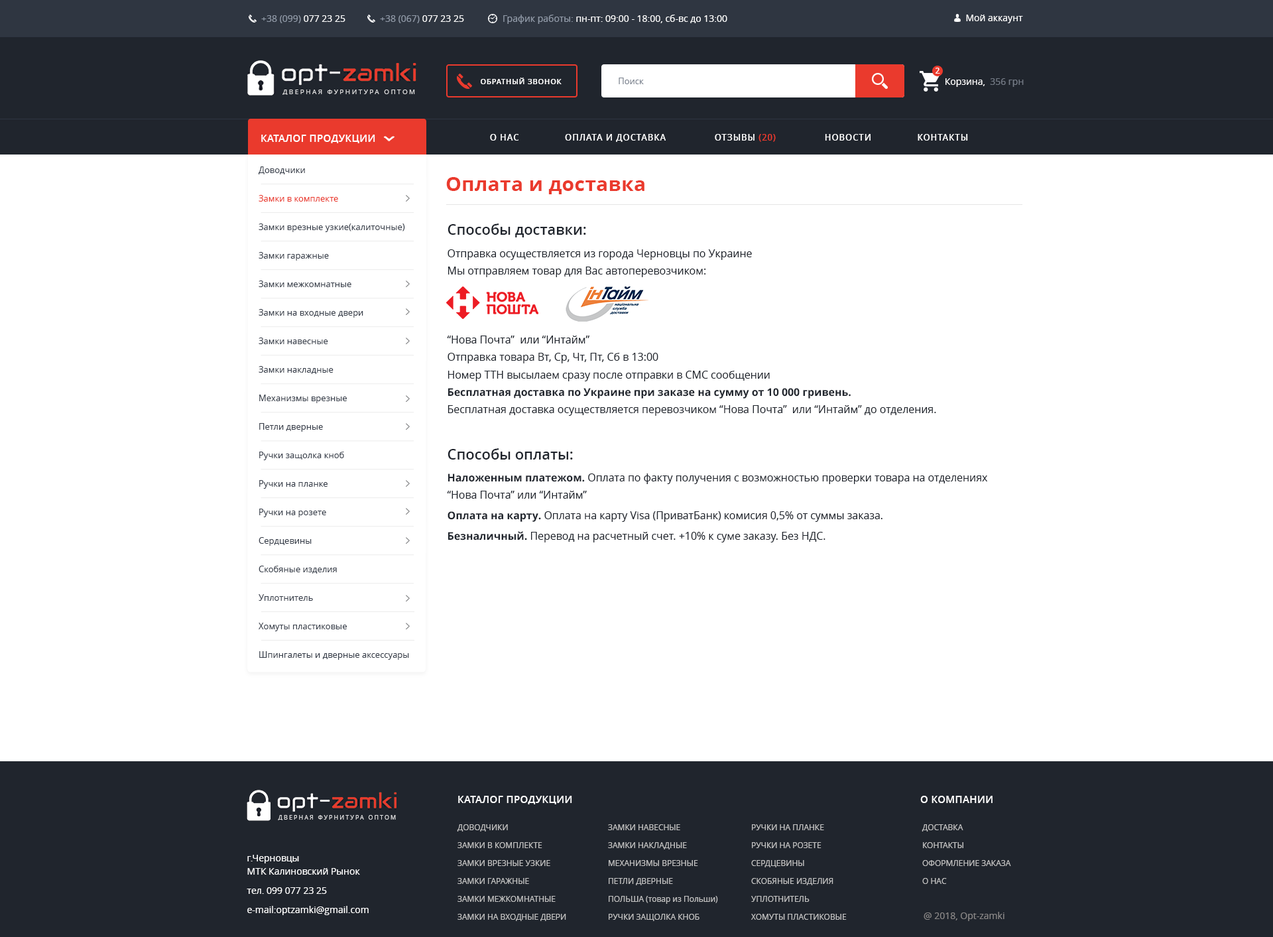
<style>
.page{position:relative;width:1273px;height:937px;background:#ffffff}
.page>*{position:absolute;margin:0}
.t1{font:9.3px "OpenSans";color:#9099a7}
.t2{font:9.3px "OpenSans";color:#ffffff}
.t3{font:7.3px "OpenSans-Semibold";letter-spacing:0.075em;color:#ffffff;text-transform:uppercase}
.t4{font:8.6px "OpenSans";color:#79818d}
.t5{font:8px "OpenSans-Semibold";color:#ffffff}
.t6{font:6.6px "OpenSans";letter-spacing:0.26em;color:#dfdfe0;text-transform:uppercase}
.t7{font:9.3px "OpenSans";color:#747b86}
.t8{font:9.9px "OpenSans-Semibold";letter-spacing:0.025em;color:#ffffff;text-transform:uppercase}
.t9{font:8.6px "OpenSans-Semibold";letter-spacing:0.07em;color:#ffffff;text-transform:uppercase}
.t10{font:8.6px "OpenSans-Semibold";letter-spacing:0.07em;color:#ea3a2d;text-transform:uppercase}
.t11{font:8.6px/28.5px "OpenSans";color:#373e4a}
.t12{font:8.6px/28.5px "OpenSans";color:#ea3a2d}
.t13{font:19.9px "OpenSans-Bold";letter-spacing:0.01em;color:#ea3a2d}
.t14{font:14.6px "OpenSans-Semibold";color:#20252d}
.t15{font:10.6px/17.3px "OpenSans";color:#20252d}
.t16{font:10.6px/17.3px "OpenSans-Bold";color:#20252d}
.t17{font:10.6px/20.6px "OpenSans-Bold";color:#20252d}
.t18{font:10.6px/20.6px "OpenSans";color:#20252d}
.t19{font:5.8px "OpenSans";letter-spacing:0.26em;color:#dfdfe0;text-transform:uppercase}
.t20{font:8px/17.9px "OpenSans";color:#c2c2c2}
.t21{font:8px/17.9px "OpenSans";color:#c2c2c2;text-transform:uppercase}
.t22{font:9.3px/19.2px "OpenSans";color:#ffffff}
.t23{font:9.3px/11.3px "OpenSans";color:#ffffff}
.t24{font:9.3px/13.3px "OpenSans";color:#ffffff}
.t25{font:9.3px "OpenSans";color:#888686}
</style>
<div class="page">
<p class="t1" style="left:261px;top:15px;width:84px;height:8px">+38 (099)<span class="t2"> 077 23 25</span></p>
<p class="t1" style="left:380px;top:15px;width:84px;height:8px">+38 (067)<span class="t2"> 077 23 25</span></p>
<p class="t2" style="left:503px;top:15px;width:224px;height:9px"><span class="t1">График работы: </span>пн-пт: 09:00 - 18:00, сб-вс до 13:00</p>
<p class="t2" style="left:966px;top:15px;width:57px;height:8px">Мой аккаунт</p>
<p class="t3" style="left:481px;top:78px;width:81px;height:6px">Обратный звонок</p>
<p class="t4" style="left:619px;top:78px;width:25px;height:6px">Поиск</p>
<p class="t5" style="left:935px;top:68px;width:5px;height:6px">2</p>
<p class="t6" style="left:282px;top:90px;width:133px;height:5px">Дверная фурнитура оптом</p>
<p class="t2" style="left:945px;top:78px;width:79px;height:9px">Корзина,  <span class="t7">356 грн</span></p>
<p class="t8" style="left:261px;top:135px;width:114px;height:8px">каталог продукции</p>
<p class="t9" style="left:490px;top:134px;width:478px;height:8px">о нас                оплата и доставка                 Отзывы <span class="t10">(20) </span>                НОВОСТИ                Контакты</p>
<p class="t11" style="left:259px;top:166px;width:150px;height:494px">Доводчики<br><span class="t12">Замки в комплекте<br></span>Замки врезные узкие(калиточные)<br>Замки гаражные<br>Замки межкомнатные<br>Замки на входные двери<br>Замки навесные<br>Замки накладные<br>Механизмы врезные<br>Петли дверные<br>Ручки защолка кноб<br>Ручки на планке<br>Ручки на розете<br>Сердцевины<br>Скобяные изделия<br>Уплотнитель<br>Хомуты пластиковые<br>Шпингалеты и дверные аксессуары</p>
<p class="t13" style="left:446px;top:177px;width:198px;height:17px">Оплата и доставка</p>
<p class="t14" style="left:448px;top:223px;width:138px;height:14px">Способы доставки:</p>
<p class="t15" style="left:447px;top:249px;width:489px;height:167px">Отправка осуществляется из города Черновцы по Украине<br>Мы отправляем товар для Вас автоперевозчиком:<br><br><br><br>“Нова Почта”  или “Интайм”<br>Отправка товара Вт, Ср, Чт, Пт, Сб в 13:00<br>Номер ТТН высылаем сразу после отправки в СМС сообщении<br><span class="t16">Бесплатная доставка по Украине при заказе на сумму от 10 000 гривень.<br></span>Бесплатная доставка осуществляется перевозчиком “Нова Почта”  или “Интайм” до отделения.</p>
<p class="t14" style="left:448px;top:448px;width:125px;height:11px">Способы оплаты:</p>
<p class="t15" style="left:447px;top:473px;width:541px;height:69px"><span class="t16">Наложенным платежом.</span> Оплата по факту получения с возможностью проверки товара на отделениях  “Нова Почта” или “Интайм” <br><span class="t17">Оплата на карту.</span><span class="t18"> Оплата на карту Visa (ПриватБанк) комисия 0,5% от суммы заказа.<br></span><span class="t17">Безналичный. </span><span class="t18">Перевод на расчетный счет. +10% к суме заказу. Без НДС.</span></p>
<p class="t8" style="left:458px;top:796px;width:114px;height:8px">каталог продукции</p>
<p class="t8" style="left:920px;top:796px;width:72px;height:7px">о компании</p>
<p class="t19" style="left:278px;top:815px;width:118px;height:5px">Дверная фурнитура оптом</p>
<p class="t20" style="left:457px;top:824px;width:109px;height:97px">ДОВОДЧИКИ<br>ЗАМКИ В КОМПЛЕКТЕ<br>ЗАМКИ ВРЕЗНЫЕ УЗКИЕ<br>ЗАМКИ ГАРАЖНЫЕ<br>ЗАМКИ МЕЖКОМНАТНЫЕ<br>ЗАМКИ НА ВХОДНЫЕ ДВЕРИ</p>
<p class="t20" style="left:608px;top:824px;width:110px;height:97px">ЗАМКИ НАВЕСНЫЕ<br>ЗАМКИ НАКЛАДНЫЕ<br>МЕХАНИЗМЫ ВРЕЗНЫЕ<br>ПЕТЛИ ДВЕРНЫЕ<br>ПОЛЬША (товар из Польши)<br>РУЧКИ ЗАЩОЛКА КНОБ</p>
<p class="t20" style="left:751px;top:824px;width:96px;height:96px">РУЧКИ НА ПЛАНКЕ<br>РУЧКИ НА РОЗЕТЕ<br>СЕРДЦЕВИНЫ<br>СКОБЯНЫЕ ИЗДЕЛИЯ<br>УПЛОТНИТЕЛЬ<br>ХОМУТЫ ПЛАСТИКОВЫЕ</p>
<p class="t21" style="left:922px;top:824px;width:89px;height:60px">Доставка<br>Контакты <br>Оформление заказа<br>о нас</p>
<p class="t22" style="left:247px;top:855px;width:122px;height:60px">г.Черн<span class="t23">овцы</span><span class="t24"><br>МТК Калиновский Рынок<br></span>тел. 099 077 23 25<br>e-mail:optzamki@gmail.com</p>
<p class="t25" style="left:924px;top:912px;width:80px;height:9px">@ 2018, Opt-zamki</p>
</div>
